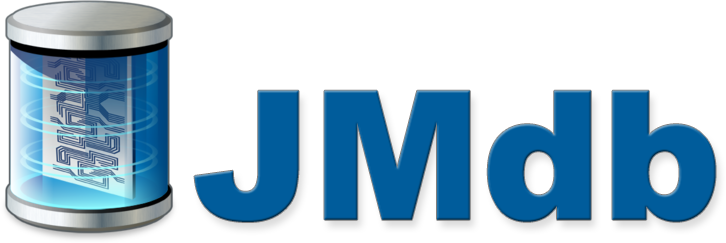
<style>
.page{position:relative;width:726px;height:243px;background:#ffffff}
.page>*{position:absolute;margin:0}
.t1{font:180px "Arial-Black";color:#005c9b}
</style>
<div class="page">
<p class="t1" style="left:194px;top:90px;width:522px;height:132px">JMdb</p>
</div>
